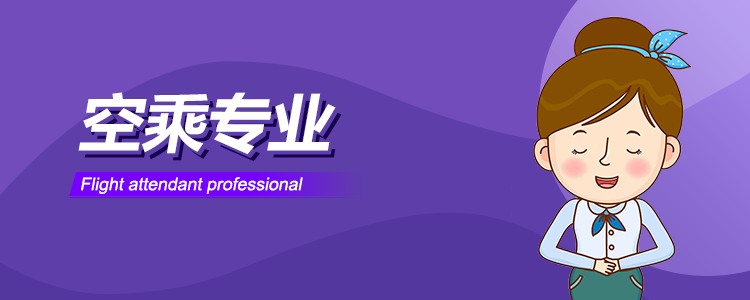
<style>
.page{position:relative;width:750px;height:300px;background:#5e3fa9}
.page>*{position:absolute;margin:0}
.t1{font:62.7px "MicrosoftYaHei-Bold";color:#ffffff;font-style:italic}
.t2{font:17.7px "ArialMT";color:#ffffff;font-style:italic}
</style>
<div class="page">
<p class="t1" style="left:78px;top:92px;width:258px;height:63px">空乘专业</p>
<p class="t2" style="left:81px;top:177px;width:222px;height:17px">Flight attendant professional</p>
</div>
